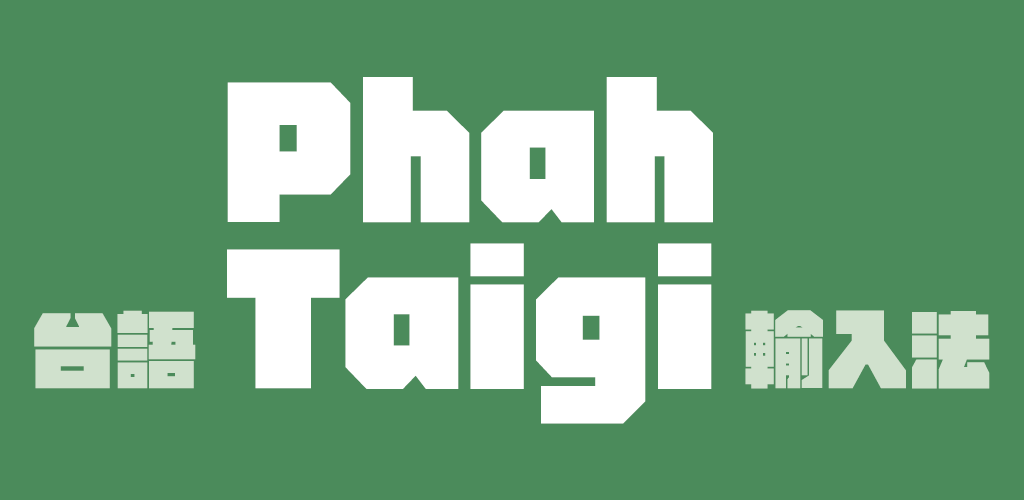
<style>
.page{position:relative;width:1024px;height:500px;background:#4b8b5b}
.page>*{position:absolute;margin:0}
.t1{font:166.7px/166.7px "burnfont-1.0-Black";color:#ffffff}
.t2{font:83.3px "burnfont-1.0-Black";color:#d0e1cd}
</style>
<div class="page">
<p class="t1" style="left:227px;top:77px;width:486px;height:347px;text-align:center">Phah<br>Taigi</p>
<p class="t2" style="left:34px;top:310px;width:162px;height:79px">台語</p>
<p class="t2" style="left:745px;top:310px;width:245px;height:79px">輸入法</p>
</div>
